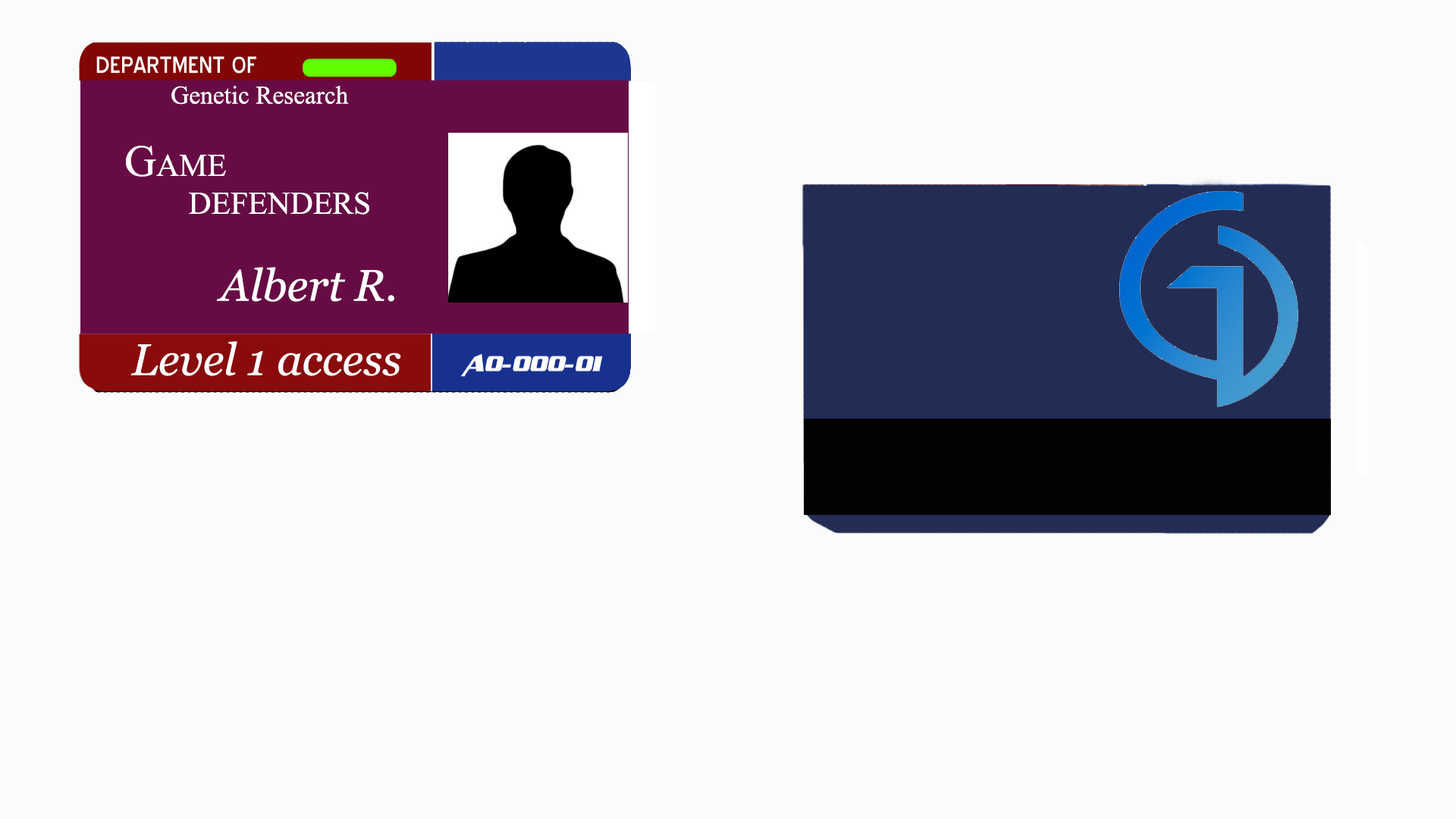
<style>
.page{position:relative;width:1456px;height:819px;background:#fbfbfb}
.page>*{position:absolute;margin:0}
.t1{font:25.3px "TimesNewRomanPSMT";color:#ffffff}
.t2{font:31.6px "TimesNewRomanPSMT";color:#ffffff}
.t3{font:44.2px "TimesNewRomanPSMT";color:#ffffff}
.t4{font:44.2px "Georgia-Italic";color:#ffffff}
</style>
<div class="page">
<p class="t1" style="left:171px;top:86px;width:178px;height:19px">Genetic Research</p>
<p class="t2" style="left:126px;top:146px;width:243px;height:69px"><span class="t3">G</span>AME <br>DEFENDERS</p>
<p class="t4" style="left:216px;top:267px;width:178px;height:35px">Albert R.</p>
<p class="t4" style="left:130px;top:341px;width:271px;height:35px">Level 1 access</p>
</div>
